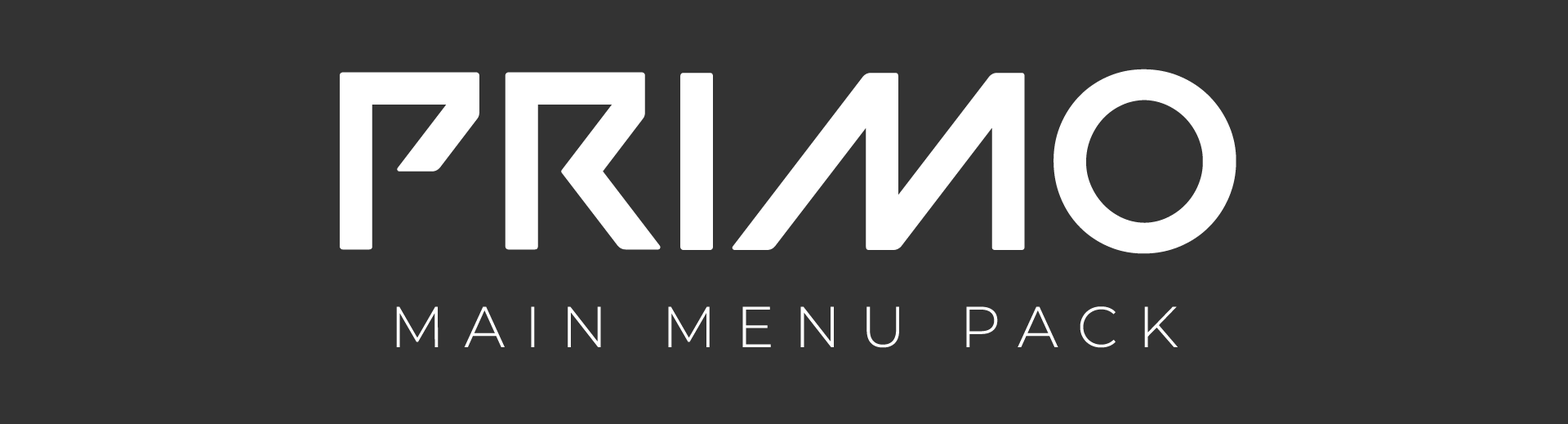
<style>
.page{position:relative;width:1568px;height:424px;background:#333333}
.page>*{position:absolute;margin:0}
.t1{font:252.7px "VALORANT-Regular";color:#ffffff;text-transform:uppercase}
.t2{font:57.5px "Montserrat-Light";letter-spacing:0.34em;color:#ffffff;text-transform:uppercase}
</style>
<div class="page">
<p class="t1" style="left:340px;top:69px;width:896px;height:185px">Primo</p>
<p class="t2" style="left:396px;top:306px;width:782px;height:42px">Main Menu Pack</p>
</div>
